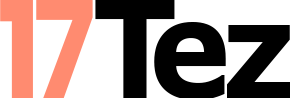
<style>
.page{position:relative;width:290px;height:98px;background:#ffffff}
.page>*{position:absolute;margin:0}
.t1{font:134.4px "Poppins-Bold";letter-spacing:0.005em;color:#ff8b70;scale:0.88 1}
.t2{font:135.8px "Poppins-Bold";letter-spacing:0.005em;color:#ff8b70;scale:0.86 1}
.t3{font:135.4px "Verdana-Bold";letter-spacing:0.005em;color:#000000;scale:0.91 1}
</style>
<div class="page">
<p class="t1" style="left:0px;top:0px;width:33px;height:98px">1</p>
<p class="t2" style="left:36px;top:0px;width:57px;height:99px">7</p>
<p class="t3" style="left:95px;top:0px;width:80px;height:98px">T</p>
<p class="t3" style="left:154px;top:22px;width:72px;height:78px">e</p>
<p class="t3" style="left:227px;top:25px;width:64px;height:74px">z</p>
</div>
